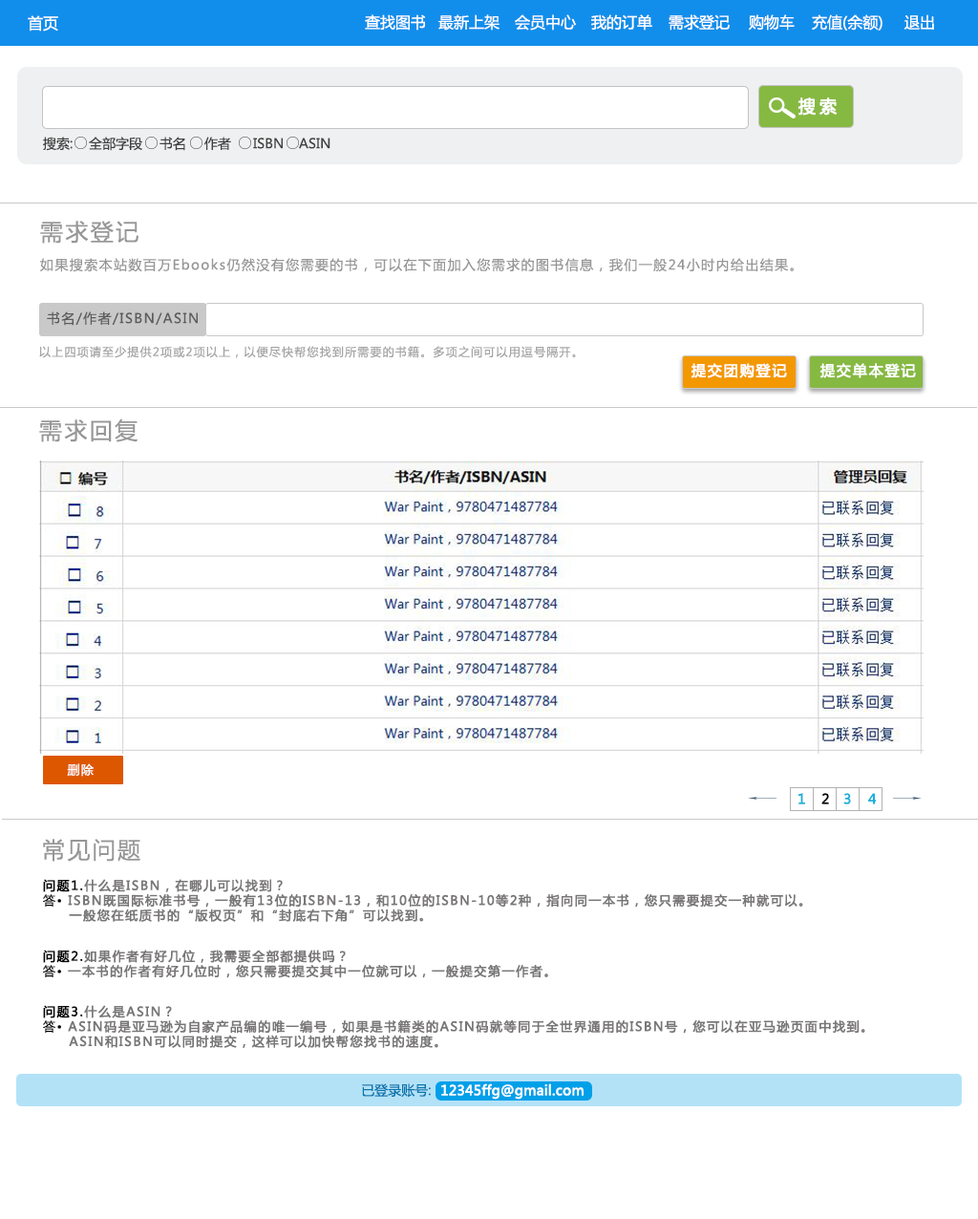
<style>
.page{position:relative;width:978px;height:1219px;background:#ffffff}
.page>*{position:absolute;margin:0}
.t1{font:15.3px "MicrosoftYaHei";color:#ffffff}
.t2{font:17.2px "MicrosoftYaHei";letter-spacing:0.2em;color:#ffffff;font-weight:bold}
.t3{font:13.4px "MicrosoftYaHei";color:#414040}
.t4{font:22.9px "MicrosoftYaHei";letter-spacing:0.1em;color:#989797}
.t5{font:13.4px "MicrosoftYaHei";letter-spacing:0.1em;color:#989797}
.t6{font:13.4px "MicrosoftYaHei";letter-spacing:0.1em;color:#5d5c5c}
.t7{font:11.5px "MicrosoftYaHei";letter-spacing:0.1em;color:#a5a5a5}
.t8{font:14.3px "MicrosoftYaHei";letter-spacing:0.1em;color:#ffffff;font-weight:bold}
.t9{font:12.4px "MicrosoftYaHei";letter-spacing:0.1em;color:#ffffff}
.t10{font:13.4px "MicrosoftYaHei";color:#19b0dc;font-weight:bold}
.t11{font:13.4px "MicrosoftYaHei";color:#000000;font-weight:bold}
.t12{font:12.4px "MicrosoftYaHei";letter-spacing:0.1em;color:#787676;font-weight:bold}
.t13{font:12.4px "MicrosoftYaHei";letter-spacing:0.1em;color:#020202;font-weight:bold}
.t14{font:12.4px "MicrosoftYaHei";letter-spacing:0.1em;color:#020202}
.t15{font:13.4px "MicrosoftYaHei";color:#0875ae}
.t16{font:13.4px "MicrosoftYaHei";color:#ffffff;font-weight:bold}
</style>
<div class="page">
<p class="t1" style="left:28px;top:15px;width:30px;height:17px">首页</p>
<p class="t1" style="left:365px;top:14px;width:61px;height:17px">查找图书</p>
<p class="t1" style="left:438px;top:14px;width:62px;height:17px">最新上架</p>
<p class="t1" style="left:515px;top:14px;width:61px;height:17px">会员中心</p>
<p class="t1" style="left:591px;top:14px;width:61px;height:17px">我的订单</p>
<p class="t1" style="left:669px;top:14px;width:61px;height:17px">需求登记</p>
<p class="t1" style="left:749px;top:14px;width:46px;height:17px">购物车</p>
<p class="t1" style="left:812px;top:14px;width:71px;height:17px">充值(余额)</p>
<p class="t1" style="left:905px;top:14px;width:29px;height:16px">退出</p>
<p class="t2" style="left:798px;top:97px;width:39px;height:19px">搜索</p>
<p class="t3" style="left:43px;top:137px;width:30px;height:14px">搜索:</p>
<p class="t3" style="left:89px;top:137px;width:53px;height:14px">全部字段</p>
<p class="t3" style="left:160px;top:137px;width:25px;height:14px">书名</p>
<p class="t3" style="left:204px;top:137px;width:27px;height:13px">作者</p>
<p class="t3" style="left:253px;top:138px;width:30px;height:11px">ISBN</p>
<p class="t3" style="left:299px;top:138px;width:32px;height:11px">ASIN</p>
<p class="t4" style="left:40px;top:221px;width:99px;height:23px">需求登记</p>
<p class="t5" style="left:40px;top:258px;width:754px;height:14px">如果搜索本站数百万Ebooks仍然没有您需要的书，可以在下面加入您需求的图书信息，我们一般24小时内给出结果。</p>
<p class="t6" style="left:47px;top:311px;width:151px;height:15px">书名/作者/ISBN/ASIN</p>
<p class="t7" style="left:39px;top:346px;width:537px;height:12px">以上四项请至少提供2项或2项以上，以便尽快帮您找到所需要的书籍。多项之间可以用逗号隔开。</p>
<p class="t8" style="left:691px;top:363px;width:96px;height:15px">提交团购登记</p>
<p class="t8" style="left:820px;top:363px;width:96px;height:15px">提交单本登记</p>
<p class="t4" style="left:39px;top:419px;width:99px;height:23px">需求回复</p>
<p class="t9" style="left:67px;top:763px;width:27px;height:14px">删除</p>
<p class="t10" style="left:799px;top:793px;width:6px;height:11px">1</p>
<p class="t11" style="left:822px;top:793px;width:7px;height:11px">2</p>
<p class="t10" style="left:844px;top:793px;width:7px;height:11px">3</p>
<p class="t10" style="left:868px;top:793px;width:9px;height:11px">4</p>
<p class="t4" style="left:43px;top:839px;width:97px;height:23px">常见问题</p>
<p class="t12" style="left:43px;top:879px;width:760px;height:43px"><span class="t13">问题1.</span>什么是ISBN，在哪儿可以找到？<br><span class="t14">答• </span>ISBN既国际标准书号，一般有13位的ISBN-13，和10位的ISBN-10等2种，指向同一本书，您只需要提交一种就可以。<br>     一般您在纸质书的“版权页”和“封底右下角”可以找到。</p>
<p class="t12" style="left:43px;top:950px;width:505px;height:28px"><span class="t13">问题2.</span>如果作者有好几位，我需要全部都提供吗？<br><span class="t14">答• </span>一本书的作者有好几位时，您只需要提交其中一位就可以，一般提交第一作者。</p>
<p class="t12" style="left:43px;top:1005px;width:823px;height:43px"><span class="t13">问题3.</span>什么是ASIN？<br><span class="t14">答• </span>ASIN码是亚马逊为自家产品编的唯一编号，如果是书籍类的ASIN码就等同于全世界通用的ISBN号，您可以在亚马逊页面中找到。<br>     ASIN和ISBN可以同时提交，这样可以加快帮您找书的速度。</p>
<p class="t15" style="left:362px;top:1083px;width:69px;height:15px">已登录账号:</p>
<p class="t16" style="left:441px;top:1083px;width:143px;height:17px">12345ffg@gmail.com</p>
</div>
